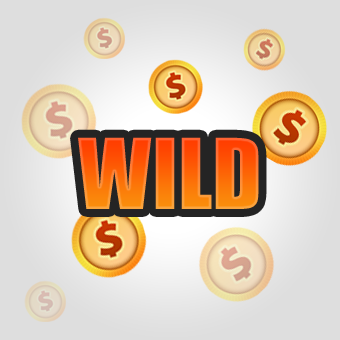
<style>
.page{position:relative;width:340px;height:340px;background:#dedede}
.page>*{position:absolute;margin:0}
.t1{font:90px "Impact"}
</style>
<div class="page">
<p class="t1" style="left:0px;top:138px;width:340px;height:106px">WILD</p>
</div>
